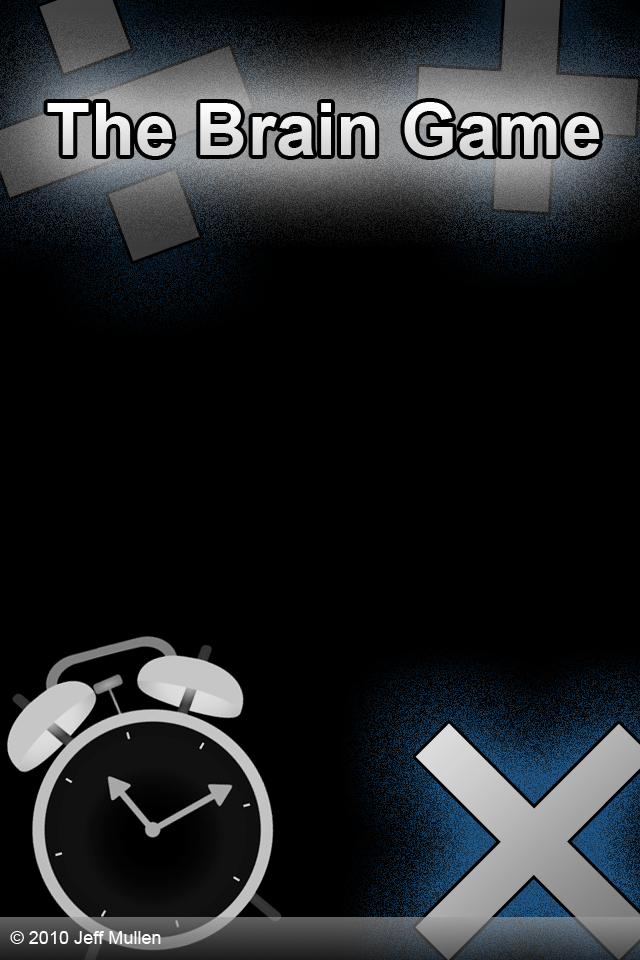
<style>
.page{position:relative;width:640px;height:960px;background:#000000}
.page>*{position:absolute;margin:0}
.t1{font:72.4px "Arial-BoldMT";color:#e5e5e5}
.t2{font:18.1px "ArialMT";color:#ffffff}
</style>
<div class="page">
<p class="t1" style="left:47px;top:102px;width:553px;height:54px">The Brain Game</p>
<p class="t2" style="left:10px;top:931px;width:151px;height:13px">© 2010 Jeff Mullen</p>
</div>
